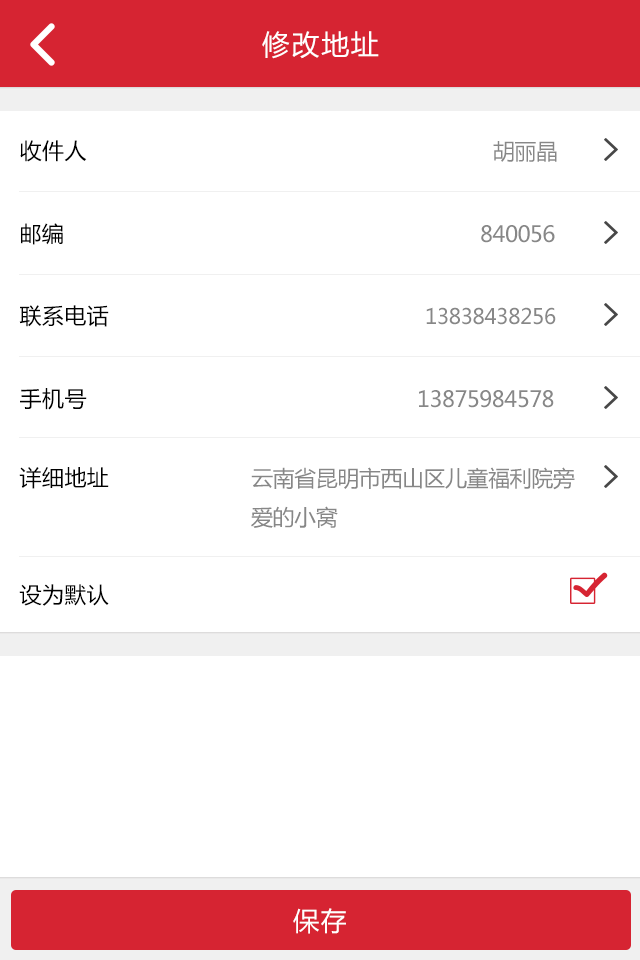
<style>
.page{position:relative;width:640px;height:960px;background:#ffffff}
.page>*{position:absolute;margin:0}
.t1{font:28px "MicrosoftYaHei";letter-spacing:0.06em;color:#ffffff}
.t2{font:22px "MicrosoftYaHei";letter-spacing:0.02em;color:#000000}
.t3{font:22px "MicrosoftYaHei";letter-spacing:-0.02em;color:#878787}
.t4{font:21px "MicrosoftYaHei";letter-spacing:-0.02em;color:#878787}
.t5{font:22px/39px "MicrosoftYaHei";letter-spacing:-0.02em;color:#878787}
.t6{font:26px "MicrosoftYaHei";letter-spacing:0.06em;color:#ffffff}
</style>
<div class="page">
<p class="t1" style="left:262px;top:31px;width:117px;height:28px">修改地址</p>
<p class="t2" style="left:20px;top:140px;width:67px;height:22px">收件人</p>
<p class="t3" style="left:493px;top:141px;width:64px;height:21px">胡丽晶</p>
<p class="t2" style="left:21px;top:223px;width:42px;height:22px">邮编</p>
<p class="t3" style="left:481px;top:225px;width:74px;height:18px">840056</p>
<p class="t2" style="left:19px;top:305px;width:90px;height:22px">联系电话</p>
<p class="t4" style="left:426px;top:307px;width:130px;height:18px">13838438256</p>
<p class="t2" style="left:20px;top:388px;width:67px;height:22px">手机号</p>
<p class="t3" style="left:419px;top:390px;width:135px;height:18px">13875984578</p>
<p class="t2" style="left:19px;top:467px;width:90px;height:22px">详细地址</p>
<p class="t5" style="left:251px;top:467px;width:324px;height:61px">云南省昆明市西山区儿童福利院旁<br>爱的小窝</p>
<p class="t2" style="left:19px;top:584px;width:90px;height:22px">设为默认</p>
<p class="t6" style="left:293px;top:908px;width:53px;height:26px">保存</p>
</div>
